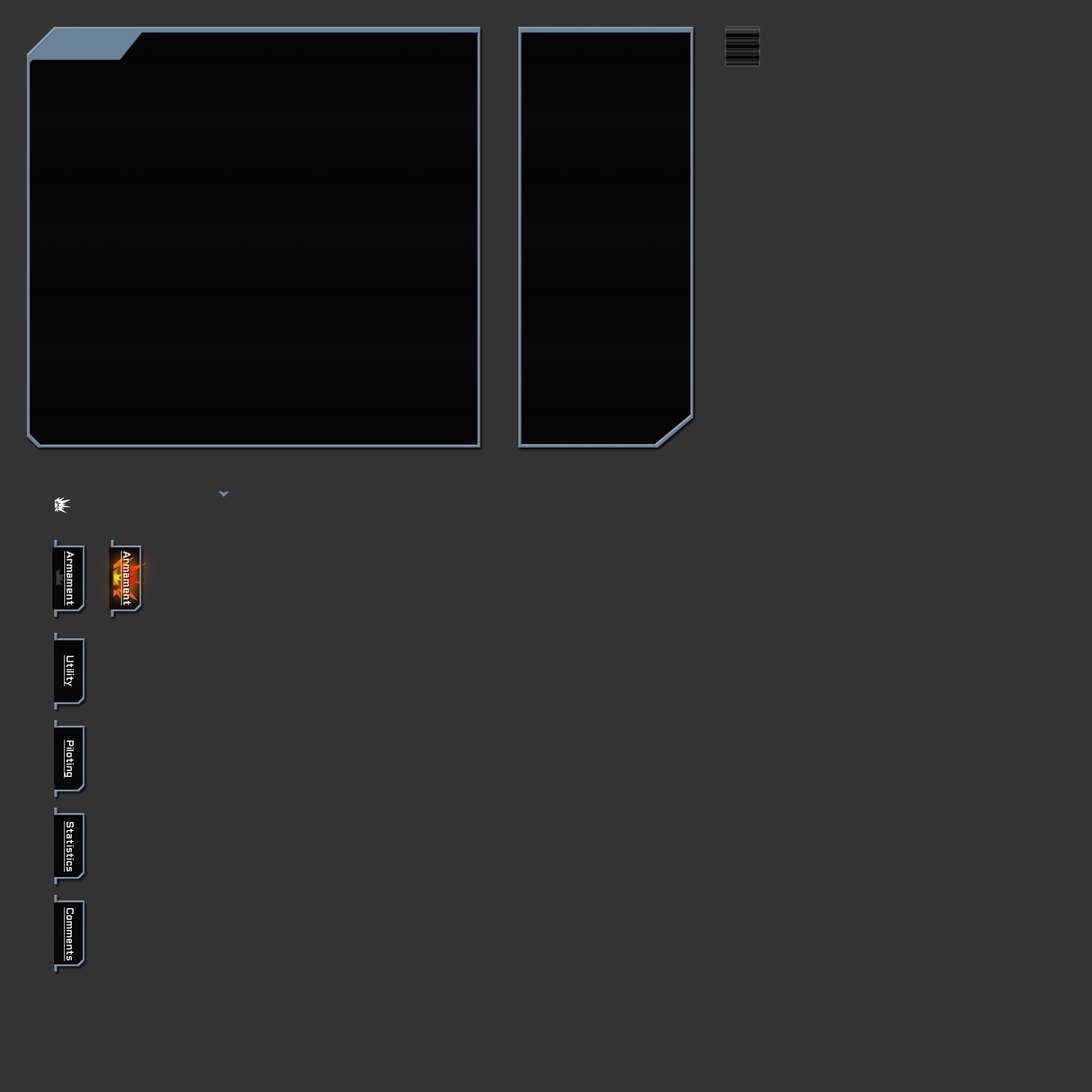
<style>
.page{position:relative;width:1092px;height:1092px;background:#333333}
.page>*{position:absolute;margin:0}
.t1{font:9.8px "Aldrich";font-weight:bold;text-decoration:underline}
.t2{font:9.8px "Aldrich";color:#ffffff;text-decoration:underline}
</style>
<div class="page">
<p class="t1" style="left:64px;top:551px;width:10px;height:55px;rotate:90deg">Armament</p>
<p class="t1" style="left:121px;top:551px;width:10px;height:55px;rotate:90deg">Armament</p>
<p class="t2" style="left:64px;top:655px;width:10px;height:32px;rotate:90deg">Utility</p>
<p class="t2" style="left:64px;top:739px;width:10px;height:39px;rotate:90deg">Piloting</p>
<p class="t2" style="left:64px;top:821px;width:10px;height:51px;rotate:90deg">Statistics</p>
<p class="t2" style="left:64px;top:907px;width:10px;height:54px;rotate:90deg">Comments</p>
</div>
